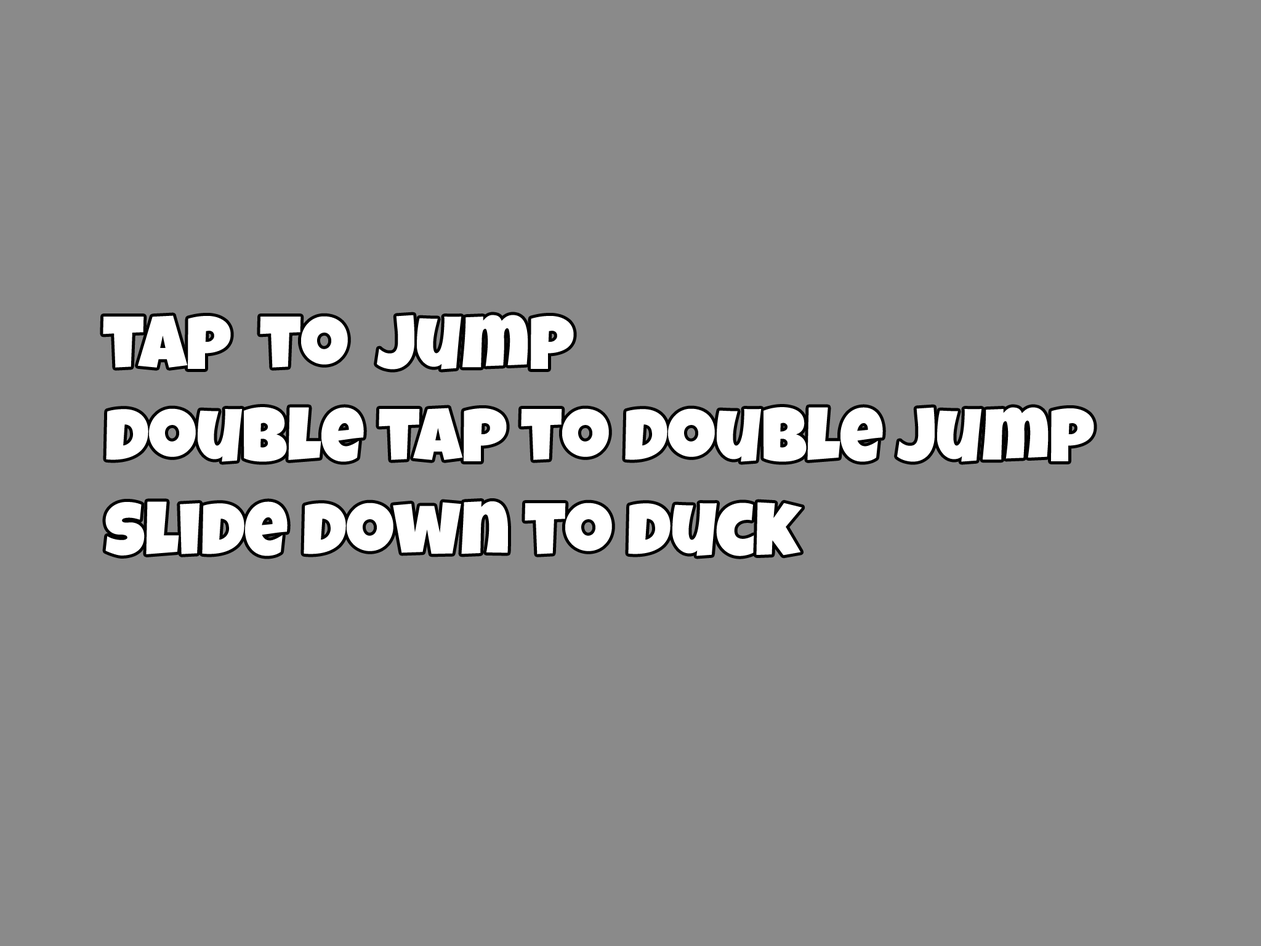
<style>
.page{position:relative;width:1261px;height:946px;background:#8a8a8a}
.page>*{position:absolute;margin:0}
.t1{font:75.1px "LuckiestGuy-Regular";color:#ffffff}
</style>
<div class="page">
<p class="t1" style="left:103px;top:315px;width:471px;height:54px">tap  to  jump</p>
<p class="t1" style="left:106px;top:407px;width:988px;height:55px">double tap to double jump</p>
<p class="t1" style="left:105px;top:501px;width:697px;height:55px">slide down to duck</p>
</div>
